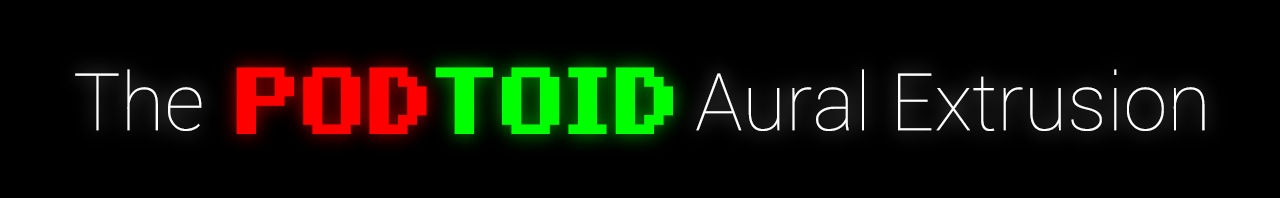
<style>
.page{position:relative;width:1280px;height:198px;background:#000000}
.page>*{position:absolute;margin:0}
.t1{font:79.6px "Roboto-Thin";color:#ffffff}
.t2{font:76px "C64Pro-Style";color:#00ff00}
.t3{font:76px "C64Pro-Style";color:#ff0000}
</style>
<div class="page">
<p class="t1" style="left:75px;top:69px;width:127px;height:62px">The</p>
<p class="t2" style="left:236px;top:67px;width:437px;height:67px"><span class="t3">POD</span>TOID</p>
<p class="t1" style="left:696px;top:69px;width:509px;height:62px">Aural Extrusion</p>
</div>
